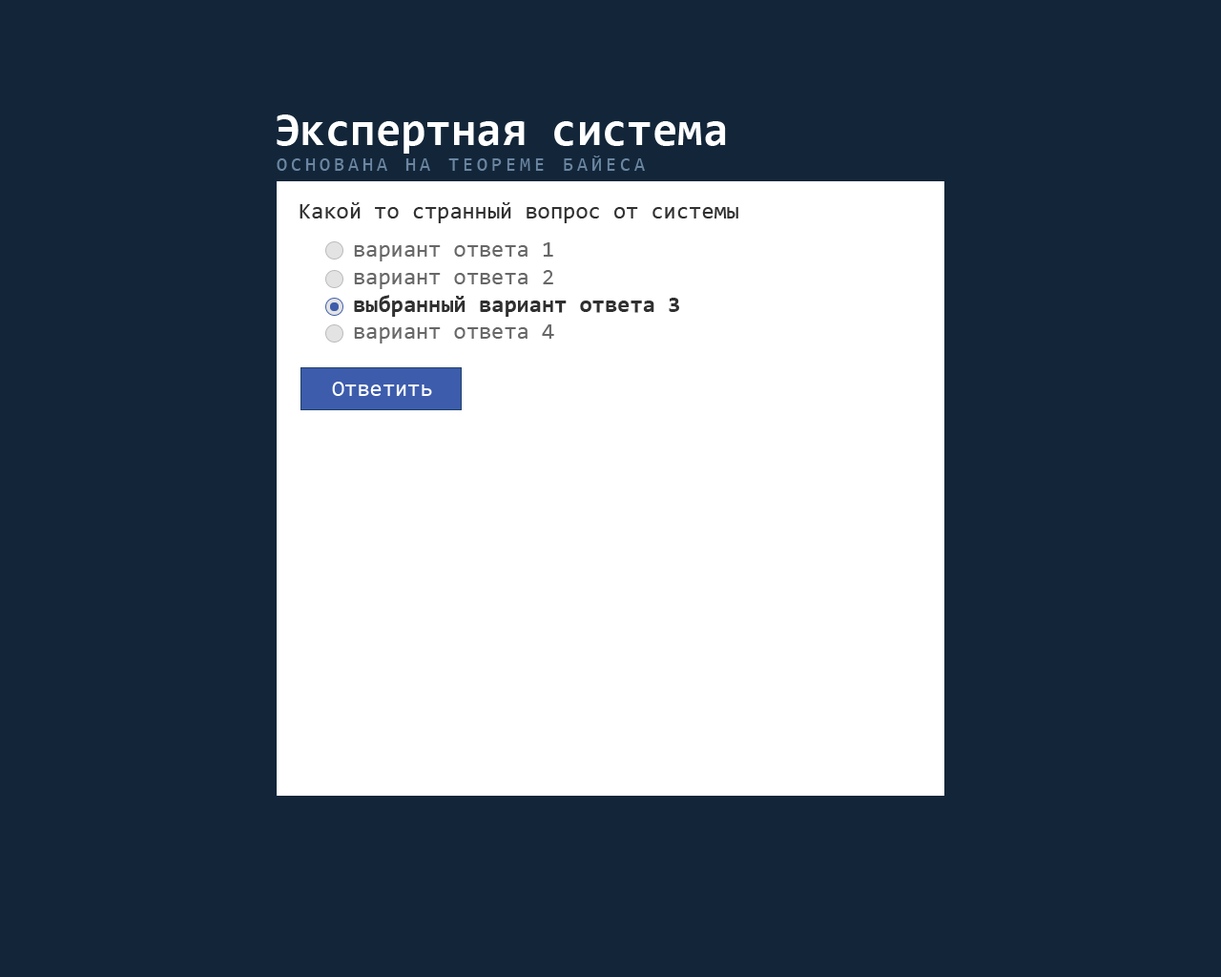
<style>
.page{position:relative;width:1221px;height:977px;background:#132639}
.page>*{position:absolute;margin:0}
.t1{font:45.8px "Consolas-Bold";color:#ffffff}
.t2{font:19.1px "Consolas";letter-spacing:0.2em;color:#6b86a2;text-transform:uppercase}
.t3{font:22.9px "Consolas";color:#303030}
.t4{font:22.9px "Consolas";color:#676767}
.t5{font:22.9px "Consolas-Bold";color:#303030}
.t6{font:22.9px "Consolas";color:#ffffff}
</style>
<div class="page">
<p class="t1" style="left:277px;top:114px;width:449px;height:40px">Экспертная система</p>
<p class="t2" style="left:277px;top:155px;width:368px;height:16px">основана на теореме Байеса</p>
<p class="t3" style="left:299px;top:202px;width:439px;height:21px">Какой то странный вопрос от системы</p>
<p class="t4" style="left:354px;top:242px;width:325px;height:101px">вариант ответа 1<br>вариант ответа 2<br><span class="t5">выбранный вариант ответа 3<br></span>вариант ответа 4</p>
<p class="t6" style="left:332px;top:382px;width:100px;height:14px">Ответить</p>
<p class="t6" style="left:332px;top:382px;width:100px;height:14px">Ответить</p>
</div>
